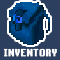
<style>
.page{position:relative;width:60px;height:60px;background:#2c3f5e}
.page>*{position:absolute;margin:0}
.t1{font:11.3px "RuneScape-UF";letter-spacing:0.06em;color:#ffffff;font-weight:bold}
</style>
<div class="page">
<p class="t1" style="left:3px;top:48px;width:54px;height:9px">INVENTORY</p>
</div>
